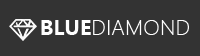
<style>
.page{position:relative;width:200px;height:56px;background:#333333}
.page>*{position:absolute;margin:0}
.t1{font:20.3px "MicrosoftYaHei-Bold";color:#ffffff}
.t2{font:20.3px "MicrosoftYaHeiLight";color:#ffffff}
</style>
<div class="page">
<p class="t1" style="left:41px;top:20px;width:50px;height:15px">BLUE</p>
<p class="t2" style="left:93px;top:20px;width:96px;height:15px">DIAMOND</p>
</div>
